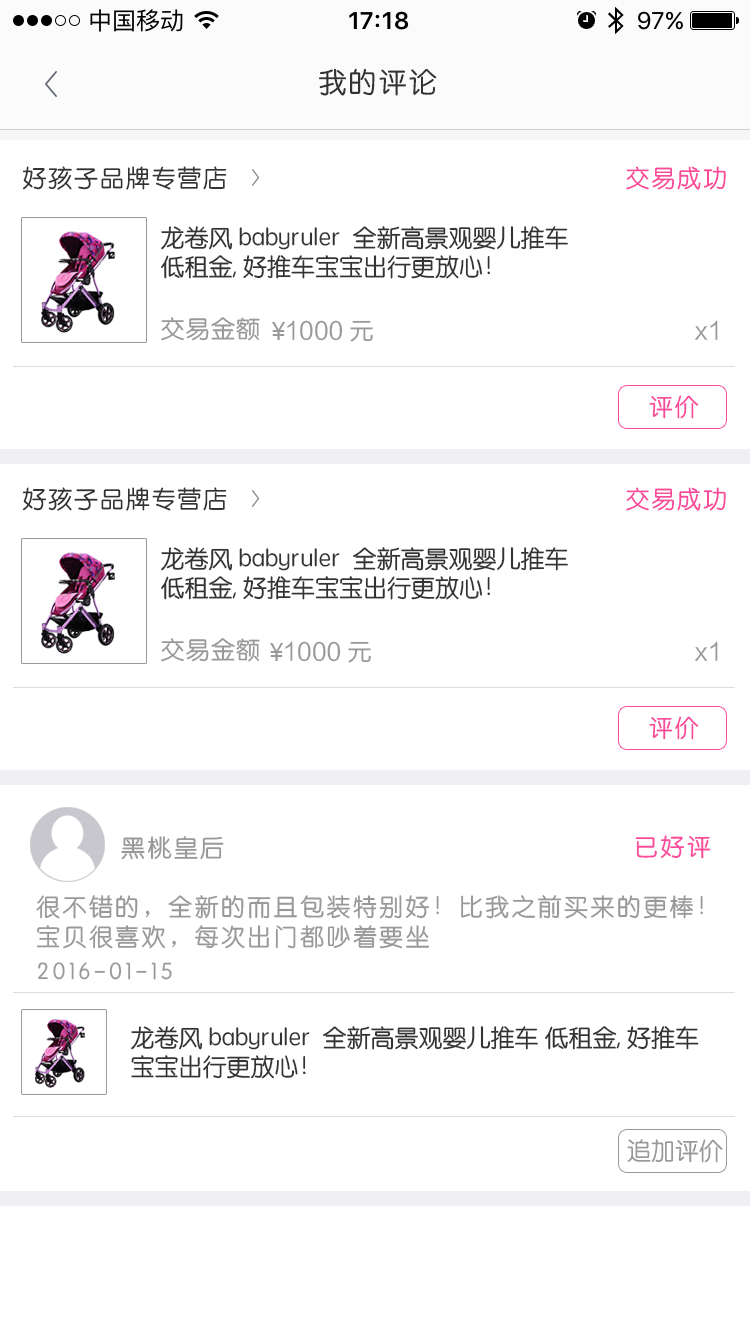
<style>
.page{position:relative;width:750px;height:1334px;background:#ffffff}
.page>*{position:absolute;margin:0}
.t1{font:28px "STYuanti-SC-Regular";letter-spacing:0.075em;color:#333333}
.t2{font:24px "STYuanti-SC-Regular";letter-spacing:0.075em;color:#333333}
.t3{font:24px "STYuanti-SC-Regular";letter-spacing:0.075em;color:#fa4b9b}
.t4{font:24px "STYuanti-SC-Regular";color:#333333}
.t5{font:24px "STYuanti-SC-Regular";letter-spacing:0.05em;color:#999999}
.t6{font:24px "MicrosoftYaHei";letter-spacing:0.05em;color:#999999}
.t7{font:24px "FZLTHK_ZJRB--GBK1-0";color:#999999}
.t8{font:24px "STYuanti-SC-Regular";letter-spacing:0.1em;color:#999999}
.t9{font:24px "STYuanti-SC-Regular";letter-spacing:0.1em;color:#fb4b9c}
.t10{font:24px/30px "STYuanti-SC-Regular";letter-spacing:0.1em;color:#999999}
.t11{font:24px "STYuanti-SC-Regular";color:#999999}
</style>
<div class="page">
<p class="t1" style="left:319px;top:68px;width:118px;height:28px">我的评论</p>
<p class="t2" style="left:23px;top:166px;width:204px;height:24px">好孩子品牌专营店</p>
<p class="t3" style="left:626px;top:166px;width:100px;height:24px">交易成功</p>
<p class="t4" style="left:161px;top:226px;width:407px;height:53px">龙卷风 babyruler  全新高景观婴儿推车 低租金, 好推车宝宝出行更放心！</p>
<p class="t5" style="left:161px;top:317px;width:99px;height:24px">交易金额</p>
<p class="t6" style="left:272px;top:322px;width:13px;height:18px">￥</p>
<p class="t7" style="left:287px;top:320px;width:86px;height:22px">1000 元</p>
<p class="t7" style="left:694px;top:320px;width:24px;height:20px">x1</p>
<p class="t3" style="left:649px;top:395px;width:50px;height:24px">评价</p>
<p class="t2" style="left:23px;top:487px;width:204px;height:24px">好孩子品牌专营店</p>
<p class="t3" style="left:626px;top:487px;width:100px;height:24px">交易成功</p>
<p class="t4" style="left:161px;top:547px;width:407px;height:53px">龙卷风 babyruler  全新高景观婴儿推车 低租金, 好推车宝宝出行更放心！</p>
<p class="t5" style="left:161px;top:638px;width:99px;height:24px">交易金额</p>
<p class="t7" style="left:285px;top:641px;width:86px;height:22px">1000 元</p>
<p class="t7" style="left:694px;top:641px;width:24px;height:20px">x1</p>
<p class="t6" style="left:270px;top:643px;width:13px;height:18px">￥</p>
<p class="t3" style="left:649px;top:716px;width:50px;height:24px">评价</p>
<p class="t8" style="left:121px;top:836px;width:103px;height:24px">黑桃皇后</p>
<p class="t9" style="left:635px;top:835px;width:76px;height:24px">已好评</p>
<p class="t10" style="left:36px;top:895px;width:667px;height:54px">很不错的，全新的而且包装特别好！比我之前买来的更棒！<br>宝贝很喜欢，每次出门都吵着要坐</p>
<p class="t8" style="left:38px;top:962px;width:134px;height:18px">2016-01-15</p>
<p class="t4" style="left:131px;top:1026px;width:568px;height:53px">龙卷风 babyruler  全新高景观婴儿推车 低租金, 好推车宝宝出行更放心！</p>
<p class="t11" style="left:627px;top:1139px;width:96px;height:24px">追加评价</p>
</div>
